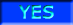
<style>
.page{position:relative;width:73px;height:25px;background:#003afe}
.page>*{position:absolute;margin:0}
.t1{font:17.5px "Verdana";font-weight:bold}
</style>
<div class="page">
<p class="t1" style="left:18px;top:5px;width:36px;height:14px">YES</p>
</div>
